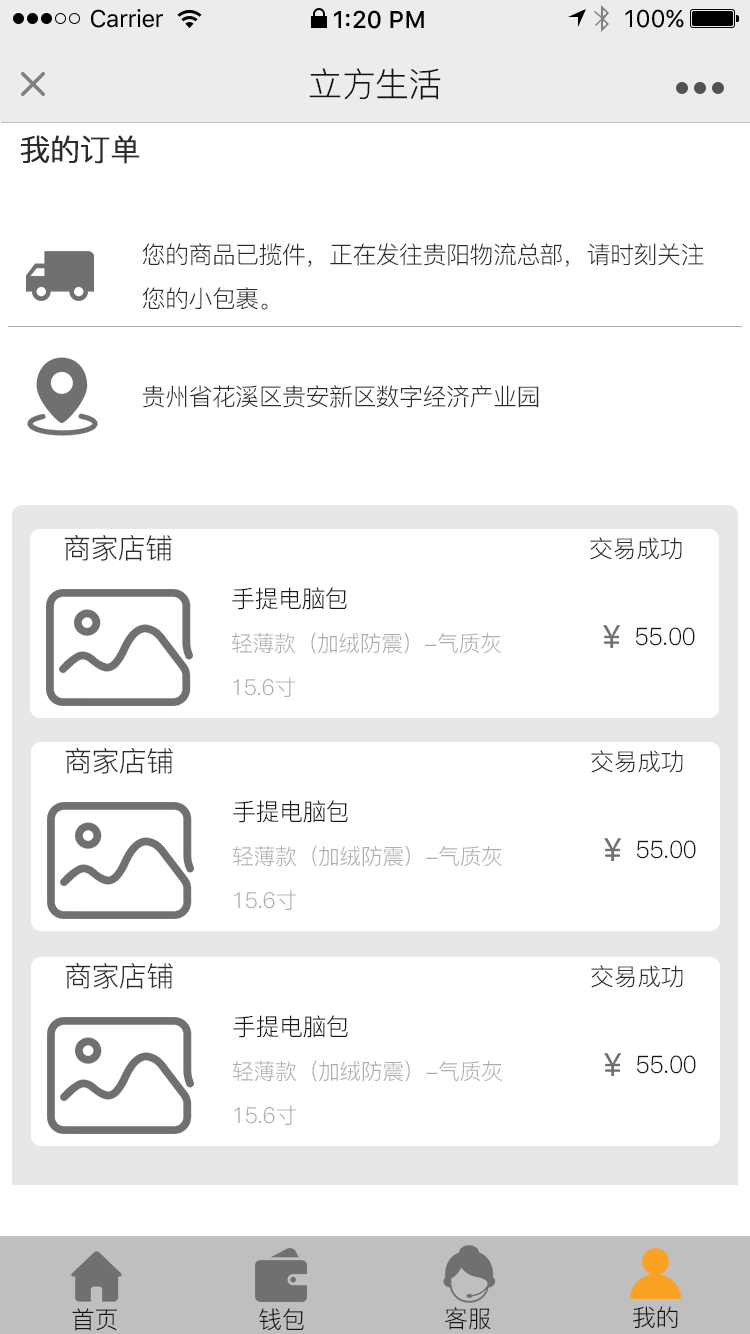
<style>
.page{position:relative;width:750px;height:1334px;background:#ffffff}
.page>*{position:absolute;margin:0}
.t1{font:24px "SFUIText-Regular";letter-spacing:-0.025em;color:#000000}
.t2{font:24px "SFUIText-Medium";color:#000000}
.t3{font:24px "SFUIText-Regular";color:#000000}
.t4{font:34px "PingFang-SC-Regular";letter-spacing:-0.02em;color:#141414}
.t5{font:30px "PingFang-SC-Regular";letter-spacing:-0.024em;color:#2c2c2c;font-weight:bold}
.t6{font:24px/44px "PingFang-SC-Regular";letter-spacing:-0.024em;color:#2c2c2c}
.t7{font:24px "PingFang-SC-Regular";letter-spacing:-0.024em;color:#2c2c2c}
.t8{font:28px "PingFang-SC-Regular";letter-spacing:-0.024em;color:#2c2c2c}
.t9{font:24px "PingFang-SC-Regular";letter-spacing:-0.024em;color:#171717}
.t10{font:22px/44px "PingFang-SC-Regular";letter-spacing:-0.024em;color:#adadad}
.t11{font:24px "PingFang-SC-Regular";letter-spacing:-0.02em;color:#141414}
</style>
<div class="page">
<p class="t1" style="left:91px;top:9px;width:72px;height:19px">Carrier</p>
<p class="t2" style="left:334px;top:10px;width:90px;height:19px">1:20 PM</p>
<p class="t3" style="left:625px;top:9px;width:59px;height:19px">100%</p>
<p class="t4" style="left:309px;top:68px;width:132px;height:32px">立方生活</p>
<p class="t5" style="left:21px;top:135px;width:119px;height:29px">我的订单</p>
<p class="t6" style="left:142px;top:243px;width:562px;height:67px">您的商品已揽件，正在发往贵阳物流总部，请时刻关注<br>您的小包裹。</p>
<p class="t7" style="left:142px;top:385px;width:397px;height:23px">贵州省花溪区贵安新区数字经济产业园</p>
<p class="t8" style="left:64px;top:535px;width:108px;height:26px">商家店铺</p>
<p class="t7" style="left:590px;top:537px;width:92px;height:23px">交易成功</p>
<p class="t9" style="left:232px;top:587px;width:115px;height:23px">手提电脑包</p>
<p class="t9" style="left:636px;top:627px;width:59px;height:19px">55.00</p>
<p class="t10" style="left:232px;top:632px;width:269px;height:65px">轻薄款（加绒防震）-气质灰<br>15.6寸</p>
<p class="t8" style="left:65px;top:748px;width:108px;height:26px">商家店铺</p>
<p class="t7" style="left:591px;top:750px;width:92px;height:23px">交易成功</p>
<p class="t9" style="left:233px;top:800px;width:115px;height:23px">手提电脑包</p>
<p class="t10" style="left:233px;top:845px;width:269px;height:65px">轻薄款（加绒防震）-气质灰<br>15.6寸</p>
<p class="t9" style="left:637px;top:840px;width:59px;height:19px">55.00</p>
<p class="t8" style="left:65px;top:963px;width:108px;height:26px">商家店铺</p>
<p class="t7" style="left:591px;top:965px;width:92px;height:23px">交易成功</p>
<p class="t9" style="left:233px;top:1015px;width:115px;height:23px">手提电脑包</p>
<p class="t10" style="left:233px;top:1060px;width:269px;height:65px">轻薄款（加绒防震）-气质灰<br>15.6寸</p>
<p class="t9" style="left:637px;top:1055px;width:59px;height:19px">55.00</p>
<p class="t11" style="left:72px;top:1308px;width:45px;height:23px">首页</p>
<p class="t11" style="left:259px;top:1308px;width:45px;height:23px">钱包</p>
<p class="t11" style="left:445px;top:1307px;width:46px;height:23px">客服</p>
<p class="t11" style="left:633px;top:1306px;width:45px;height:22px">我的</p>
</div>
